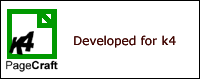
<style>
.page{position:relative;width:200px;height:79px;background:#ffffff}
.page>*{position:absolute;margin:0}
.t1{font:12px "Verdana";color:#430905}
</style>
<div class="page">
<p class="t1" style="left:74px;top:35px;width:102px;height:13px">Developed for k4</p>
</div>
